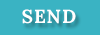
<style>
.page{position:relative;width:100px;height:35px;background:#3ab3c3}
.page>*{position:absolute;margin:0}
.t1{font:18.8px "Lora-Bold";letter-spacing:0.05em;color:#ffffff;text-transform:uppercase}
</style>
<div class="page">
<p class="t1" style="left:22px;top:9px;width:54px;height:15px">send</p>
</div>
